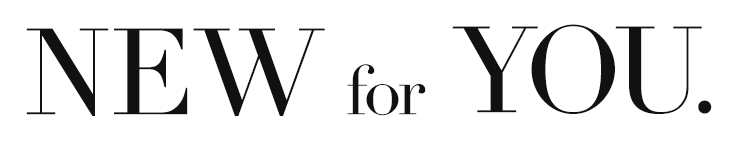
<style>
.page{position:relative;width:738px;height:145px;background:#ffffff}
.page>*{position:absolute;margin:0}
.t1{font:120px "Didot";color:#111111;text-transform:uppercase}
.t2{font:68.4px "Didot";color:#111111}
</style>
<div class="page">
<p class="t1" style="left:26px;top:28px;width:299px;height:88px">New</p>
<p class="t1" style="left:452px;top:24px;width:260px;height:90px">You.</p>
<p class="t2" style="left:347px;top:64px;width:79px;height:52px">for</p>
</div>
